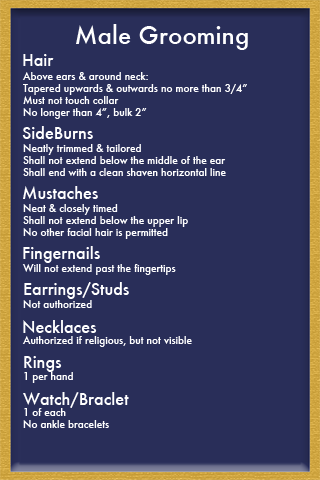
<style>
.page{position:relative;width:320px;height:480px;background:#292e59}
.page>*{position:absolute;margin:0}
.t1{font:24px "Futura-Medium";color:#ffffff}
.t2{font:16px "Futura-Medium";color:#ffffff}
.t3{font:10px "Futura-Medium";color:#ffffff}
</style>
<div class="page">
<p class="t1" style="left:76px;top:24px;width:172px;height:26px">Male Grooming</p>
<p class="t2" style="left:23px;top:54px;width:31px;height:12px">Hair</p>
<p class="t3" style="left:22px;top:72px;width:225px;height:356px">Above ears &amp; around neck:<br>Tapered upwards &amp; outwards no more than 3/4”<br>Must not touch collar<br>No longer than 4”, bulk 2”<br><br> <br>Neatly trimmed &amp; tailored<br>Shall not extend below the middle of the ear<br>Shall end with a clean shaven horizontal line<br><br> <br>Neat &amp; closely timed<br>Shall not extend below the upper lip<br>No other facial hair is permitted<br><br> <br>Will not extend past the fingertips<br><br> <br>Not authorized<br><br> <br>Authorized if religious, but not visible<br><br><br>1 per hand<br><br> <br>1 of each<br>No ankle bracelets</p>
<p class="t2" style="left:22px;top:126px;width:71px;height:13px">SideBurns</p>
<p class="t2" style="left:23px;top:186px;width:75px;height:13px">Mustaches</p>
<p class="t2" style="left:23px;top:246px;width:77px;height:17px">Fingernails</p>
<p class="t2" style="left:24px;top:282px;width:105px;height:17px">Earrings/Studs</p>
<p class="t2" style="left:23px;top:320px;width:74px;height:13px">Necklaces</p>
<p class="t2" style="left:24px;top:356px;width:38px;height:16px">Rings</p>
<p class="t2" style="left:23px;top:392px;width:106px;height:16px">Watch/Braclet</p>
</div>
